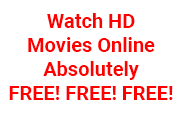
<style>
.page{position:relative;width:180px;height:120px;background:#ffffff}
.page>*{position:absolute;margin:0}
.t1{font:20px "Roboto-Bold";color:#ff0000}
</style>
<div class="page">
<p class="t1" style="left:9px;top:13px;width:164px;height:87px;text-align:center">Watch HD<br>Movies Online<br>Absolutely<br>FREE! FREE! FREE!</p>
</div>
